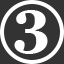
<style>
.page{position:relative;width:64px;height:64px;background:#333333}
.page>*{position:absolute;margin:0}
.t1{font:60px "Georgia-Bold";color:#ffffff}
</style>
<div class="page">
<p class="t1" style="left:14px;top:10px;width:34px;height:44px">3</p>
</div>
